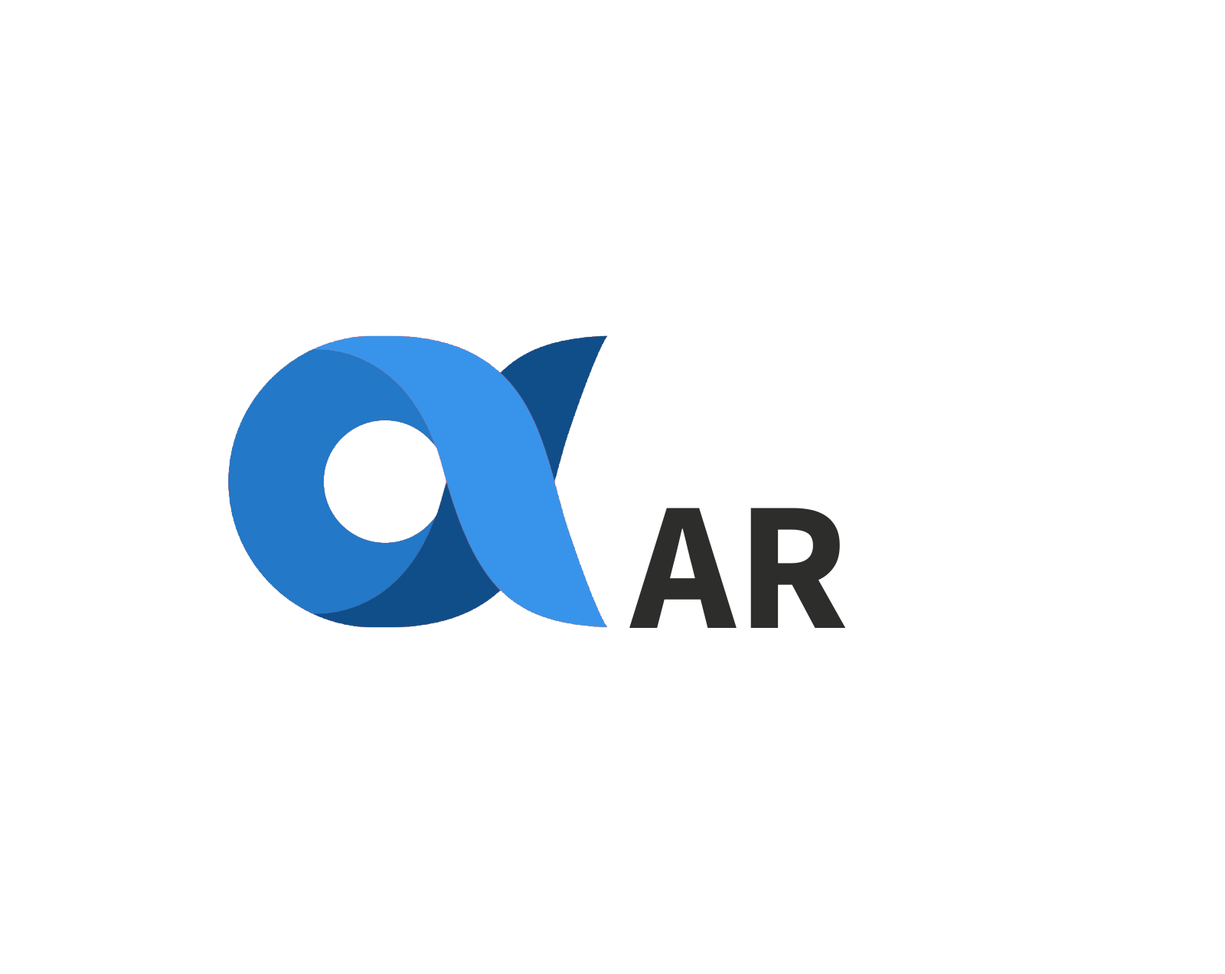
<style>
.page{position:relative;width:1225px;height:974px;background:#ffffff}
.page>*{position:absolute;margin:0}
.t1{font:183.7px "SourceCodePro-Bold";color:#2d2d2c}
</style>
<div class="page">
<p class="t1" style="left:629px;top:507px;width:217px;height:121px">AR</p>
</div>
